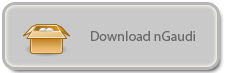
<style>
.page{position:relative;width:225px;height:73px;background:#c9c9c9}
.page>*{position:absolute;margin:0}
.t1{font:14px "MyriadPro-Regular";color:#6a6a6a}
</style>
<div class="page">
<p class="t1" style="left:91px;top:31px;width:104px;height:10px">Download nGaudi</p>
</div>
